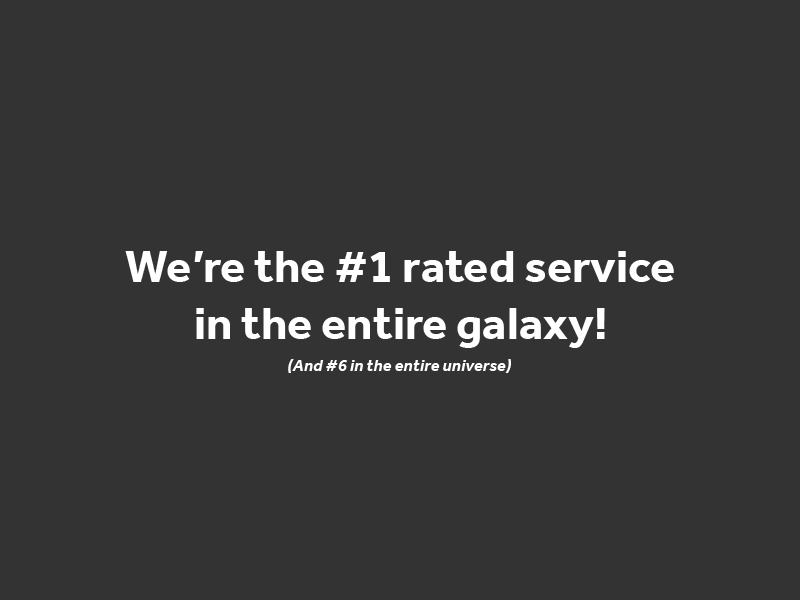
<style>
.page{position:relative;width:800px;height:600px;background:#333333}
.page>*{position:absolute;margin:0}
.t1{font:47.1px "Effra-Bold";color:#ffffff}
.t2{font:17.2px "Effra-BoldItalic";color:#ffffff}
</style>
<div class="page">
<p class="t1" style="left:125px;top:251px;width:549px;height:97px;text-align:center">We’re the #1 rated service<br>in the entire galaxy!</p>
<p class="t2" style="left:288px;top:359px;width:223px;height:14px">(And #6 in the entire universe)</p>
</div>
